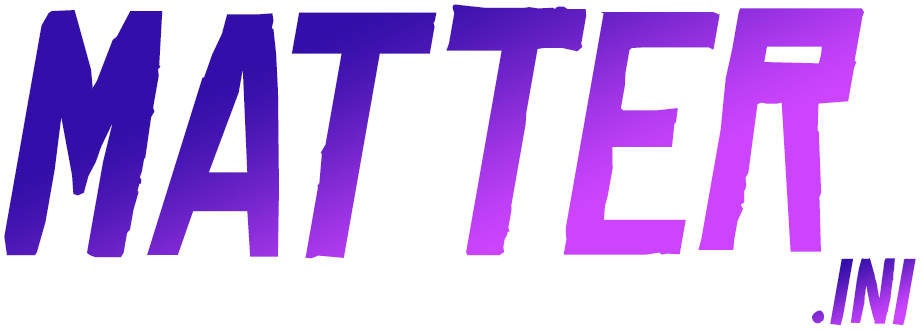
<style>
.page{position:relative;width:920px;height:330px;background:#ffffff}
.page>*{position:absolute;margin:0}
.t1{font:329px "ChineseRocksRg-Regular";font-style:italic}
.t2{font:89px "ChineseRocksRg-Regular";font-style:italic}
</style>
<div class="page">
<p class="t1" style="left:4px;top:4px;width:861px;height:255px">MATTER</p>
<p class="t2" style="left:812px;top:258px;width:104px;height:68px">.ini</p>
</div>
